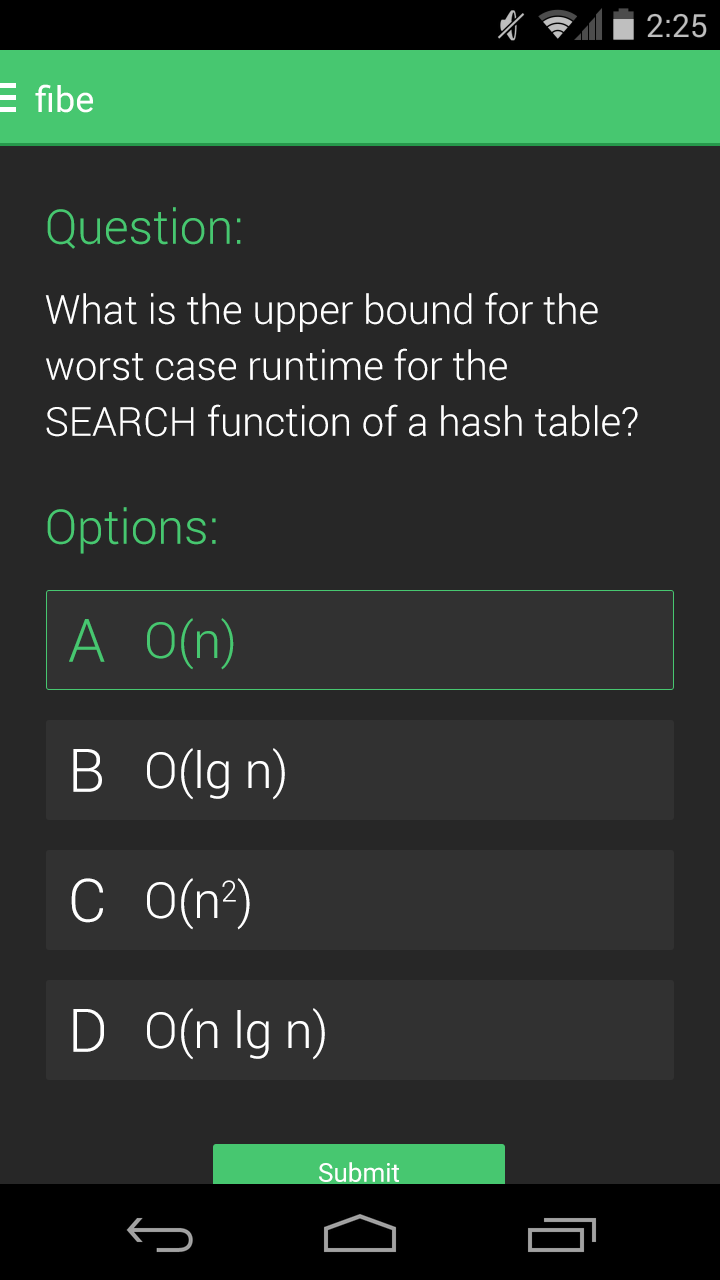
<style>
.page{position:relative;width:720px;height:1280px;background:#272727}
.page>*{position:absolute;margin:0}
.t1{font:36px "Roboto-Regular";color:#ffffff}
.t2{font:48px "Roboto-Light";color:#47c770}
.t3{font:40px/56px "Roboto-Light";color:#ffffff}
.t4{font:60px "Roboto-Light";color:#47c770}
.t5{font:50px "Roboto-Light";color:#47c770}
.t6{font:60px "Roboto-Light";color:#ffffff}
.t7{font:50px "Roboto-Light";color:#ffffff}
.t8{font:26px "Roboto-Regular";color:#ffffff}
</style>
<div class="page">
<p class="t1" style="left:35px;top:84px;width:58px;height:29px">fibe</p>
<p class="t2" style="left:47px;top:207px;width:194px;height:42px">Question:</p>
<p class="t3" style="left:45px;top:292px;width:593px;height:145px">What is the upper bound for the worst case runtime for the SEARCH function of a hash table?</p>
<p class="t2" style="left:47px;top:507px;width:169px;height:47px">Options:</p>
<p class="t4" style="left:69px;top:619px;width:36px;height:43px">A</p>
<p class="t5" style="left:147px;top:618px;width:87px;height:52px">O(n)</p>
<p class="t6" style="left:73px;top:749px;width:29px;height:43px">B</p>
<p class="t7" style="left:147px;top:748px;width:138px;height:52px">O(lg n)</p>
<p class="t6" style="left:71px;top:878px;width:32px;height:45px">C</p>
<p class="t7" style="left:147px;top:878px;width:103px;height:52px">O(n2)</p>
<p class="t6" style="left:73px;top:1009px;width:31px;height:43px">D</p>
<p class="t7" style="left:147px;top:1008px;width:178px;height:52px">O(n lg n)</p>
<p class="t8" style="left:319px;top:1162px;width:80px;height:20px">Submit</p>
</div>
